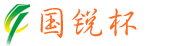
<style>
.page{position:relative;width:175px;height:46px;background:#ffffff}
.page>*{position:absolute;margin:0}
.t1{font:35.1px "GBHerSin-Medium";color:#ff6a21;text-transform:uppercase}
</style>
<div class="page">
<p class="t1" style="left:40px;top:8px;width:97px;height:31px">国锐杯</p>
</div>
